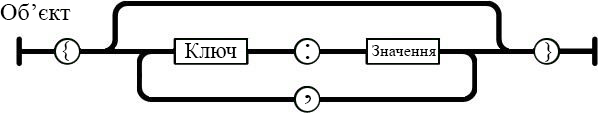
<style>
.page{position:relative;width:598px;height:113px;background:#ffffff}
.page>*{position:absolute;margin:0}
.t1{font:24.3px "TimesNewRomanPSMT";color:#000000}
.t2{font:21.5px "TimesNewRomanPSMT";color:#000000}
.t3{font:22.1px "TimesNewRomanPSMT";color:#000000}
.t4{font:33.1px "TimesNewRomanPSMT";color:#000000}
.t5{font:16.5px "TimesNewRomanPSMT";color:#000000}
.t6{font:21.7px "TimesNewRomanPSMT";color:#000000}
.t7{font:40.1px "TimesNewRomanPSMT";color:#000000}
</style>
<div class="page">
<p class="t1" style="left:0px;top:3px;width:71px;height:17px">Об’єкт</p>
<p class="t2" style="left:62px;top:41px;width:7px;height:20px">{</p>
<p class="t3" style="left:184px;top:43px;width:53px;height:15px">Ключ</p>
<p class="t4" style="left:305px;top:44px;width:5px;height:15px">:</p>
<p class="t5" style="left:372px;top:45px;width:64px;height:11px">Значення</p>
<p class="t6" style="left:545px;top:42px;width:7px;height:20px">}</p>
<p class="t7" style="left:305px;top:95px;width:6px;height:9px">,</p>
</div>
